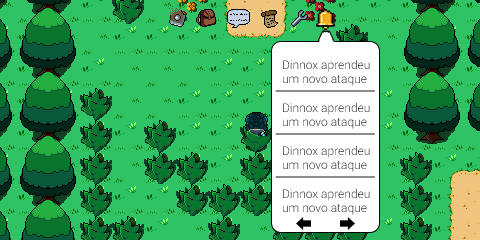
<style>
.page{position:relative;width:480px;height:240px;background:#30c366}
.page>*{position:absolute;margin:0}
.t1{font:12px "Roboto-Light"}
</style>
<div class="page">
<p class="t1" style="left:283px;top:60px;width:87px;height:26px">Dinnox aprendeu<br>um novo ataque</p>
<p class="t1" style="left:283px;top:103px;width:87px;height:26px">Dinnox aprendeu<br>um novo ataque</p>
<p class="t1" style="left:283px;top:146px;width:87px;height:26px">Dinnox aprendeu<br>um novo ataque</p>
<p class="t1" style="left:283px;top:189px;width:87px;height:26px">Dinnox aprendeu<br>um novo ataque</p>
</div>
